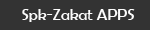
<style>
.page{position:relative;width:150px;height:30px;background:#333333}
.page>*{position:absolute;margin:0}
.t1{font:16px "BerlinSansFB-Reg";color:#fbfbfb}
</style>
<div class="page">
<p class="t1" style="left:22px;top:9px;width:113px;height:13px">Spk-Zakat APPS</p>
</div>
